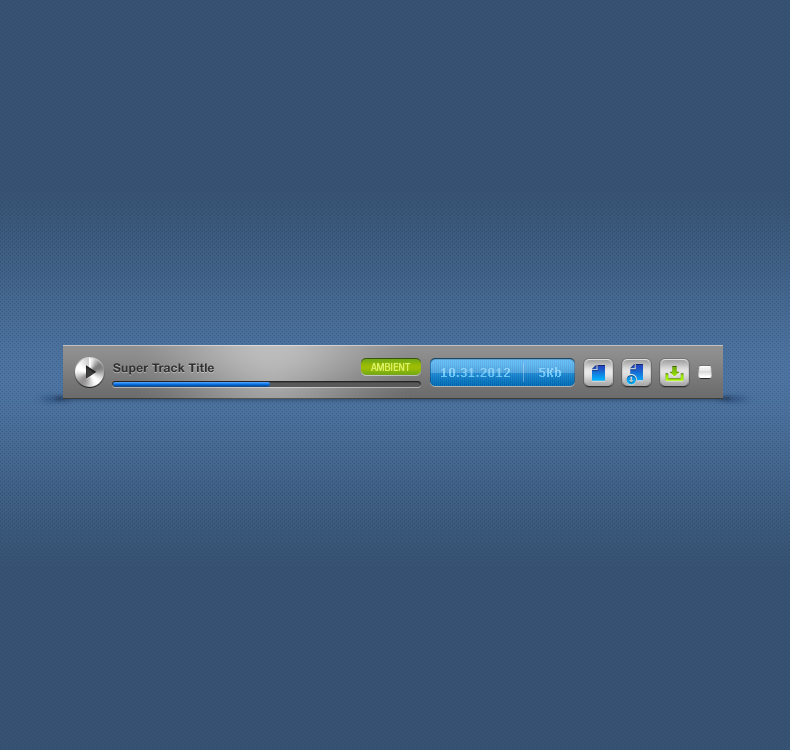
<style>
.page{position:relative;width:790px;height:750px;background:#375373}
.page>*{position:absolute;margin:0}
.t1{font:12px "HelveticaNeueLTStd-Bd";letter-spacing:0.025em;color:#303030}
.t2{font:16px "My-Phone-N1280";letter-spacing:0.025em}
</style>
<div class="page">
<p class="t1" style="left:113px;top:363px;width:101px;height:12px">Super Track Title</p>
<p class="t2" style="left:441px;top:367px;width:120px;height:10px">10.31.2012        5Kb</p>
</div>
